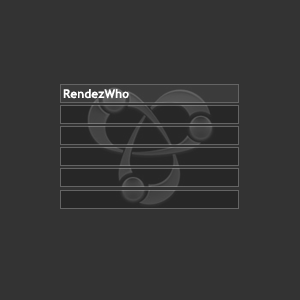
<style>
.page{position:relative;width:300px;height:300px;background:#333333}
.page>*{position:absolute;margin:0}
.t1{font:12px "TrebuchetMS-Bold";color:#ffffff}
</style>
<div class="page">
<p class="t1" style="left:63px;top:89px;width:66px;height:10px">RendezWho</p>
</div>
